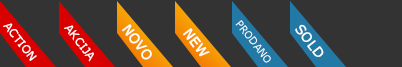
<style>
.page{position:relative;width:402px;height:67px;background:#333333}
.page>*{position:absolute;margin:0}
.t1{font:11px "Verdana";color:#ffffff;font-weight:bold}
.t2{font:13px "Verdana";color:#ffffff;font-weight:bold}
.t3{font:10px "Verdana";color:#ffffff}
</style>
<div class="page">
<p class="t1" style="left:3px;top:23px;width:34px;height:38px;rotate:52deg">ACTION</p>
<p class="t1" style="left:64px;top:25px;width:30px;height:37px;rotate:52deg">AKCIJA</p>
<p class="t2" style="left:122px;top:24px;width:30px;height:36px;rotate:53deg">NOVO</p>
<p class="t2" style="left:183px;top:28px;width:27px;height:29px;rotate:53deg">NEW</p>
<p class="t3" style="left:235px;top:20px;width:36px;height:43px;rotate:52deg">PRODANO</p>
<p class="t2" style="left:295px;top:24px;width:29px;height:33px;rotate:52deg">SOLD</p>
</div>
